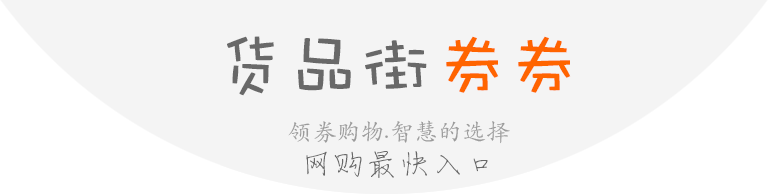
<style>
.page{position:relative;width:768px;height:194px;background:#f4f4f4}
.page>*{position:absolute;margin:0}
.t1{font:72px "DFWaWaSC-W5";color:#686868}
.t2{font:72px "DFWaWaSC-W5";color:#ff6400}
.t3{font:24px "STKaiti";color:#9b9b9b}
</style>
<div class="page">
<p class="t1" style="left:227px;top:36px;width:200px;height:60px">货品街</p>
<p class="t2" style="left:446px;top:36px;width:125px;height:57px">券券</p>
<p class="t3" style="left:288px;top:120px;width:222px;height:24px">领券购物.智慧的选择</p>
</div>
